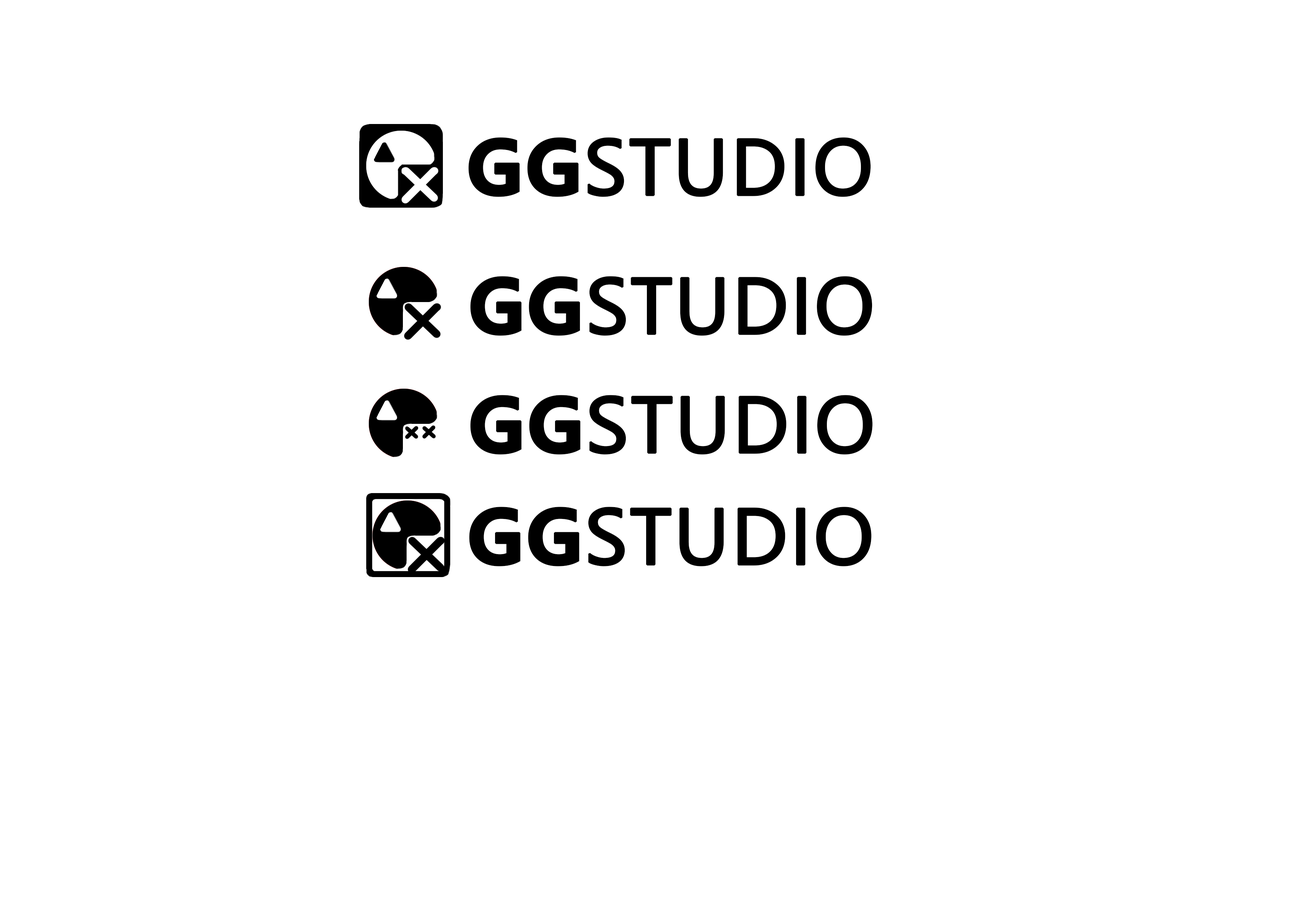
<style>
.page{position:relative;width:1299px;height:918px;background:#ffffff}
.page>*{position:absolute;margin:0}
.t1{font:74px "MicrosoftYaHei";color:#000000;text-transform:uppercase;font-weight:bold}
.t2{font:74px "MicrosoftYaHei-Bold";color:#000000;text-transform:uppercase;font-weight:bold}
</style>
<div class="page">
<p class="t1" style="left:468px;top:137px;width:403px;height:60px"><span class="t2">GG</span>STUDIO</p>
<p class="t1" style="left:470px;top:276px;width:402px;height:60px"><span class="t2">GG</span>STUDIO</p>
<p class="t1" style="left:470px;top:395px;width:403px;height:60px"><span class="t2">GG</span>STUDIO</p>
<p class="t1" style="left:469px;top:507px;width:403px;height:59px"><span class="t2">GG</span>STUDIO</p>
</div>
